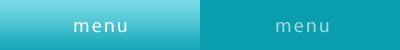
<style>
.page{position:relative;width:400px;height:50px;background:#0a9dae}
.page>*{position:absolute;margin:0}
.t1{font:20px "MyriadPro-Regular";letter-spacing:0.1em;color:#ffffff}
.t2{font:20px "MyriadPro-Regular";letter-spacing:0.1em;color:#a8d8dd}
</style>
<div class="page">
<p class="t1" style="left:74px;top:22px;width:53px;height:11px">menu</p>
<p class="t2" style="left:276px;top:22px;width:53px;height:11px">menu</p>
</div>
